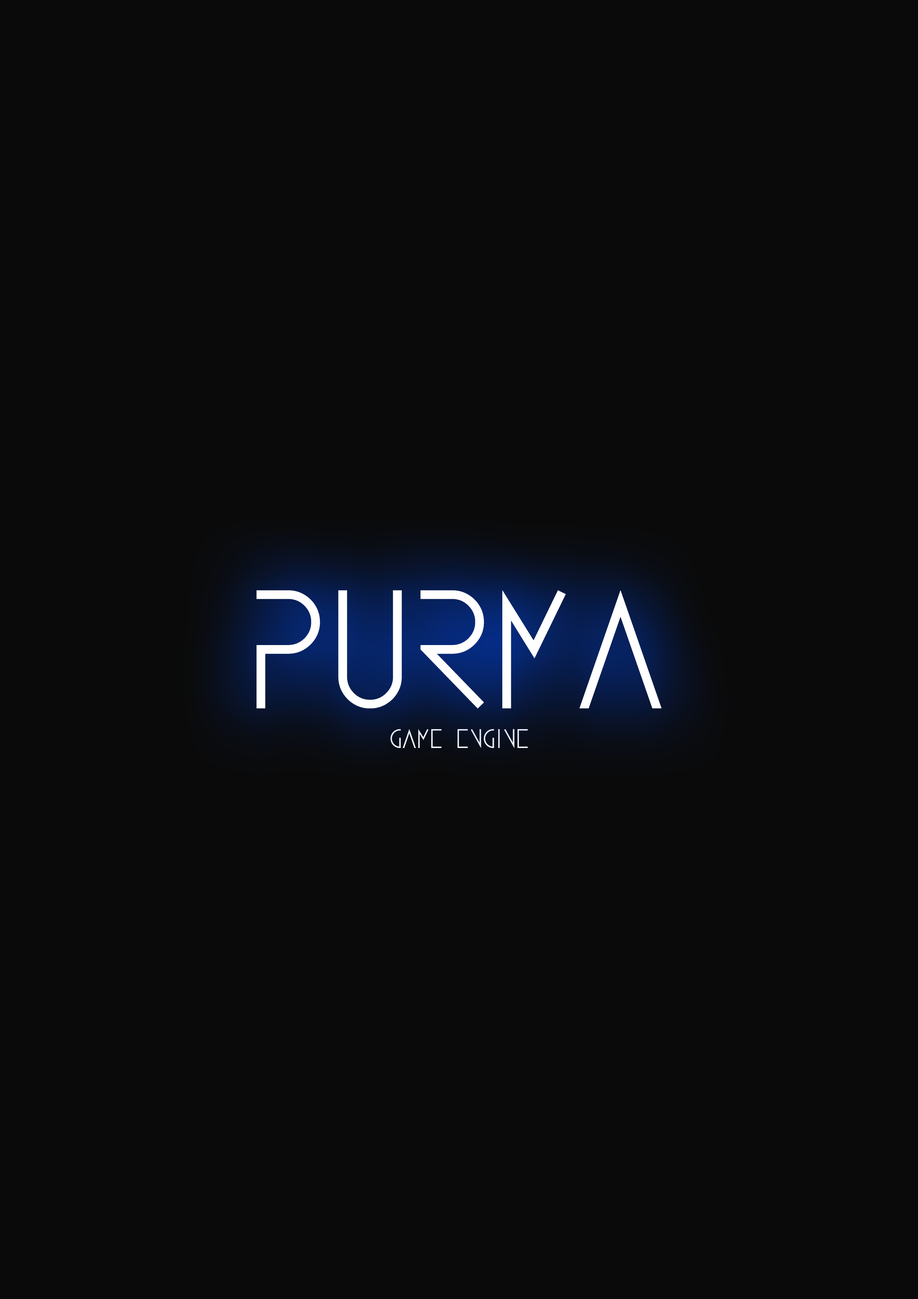
<style>
.page{position:relative;width:918px;height:1299px;background:#0a0a0a}
.page>*{position:absolute;margin:0}
.t1{font:154.3px "AVA";color:#ffffff}
.t2{font:24.7px "AVA";color:#ffffff}
</style>
<div class="page">
<p class="t1" style="left:257px;top:590px;width:405px;height:118px">PURMA</p>
<p class="t2" style="left:391px;top:729px;width:137px;height:19px">game engine</p>
</div>
